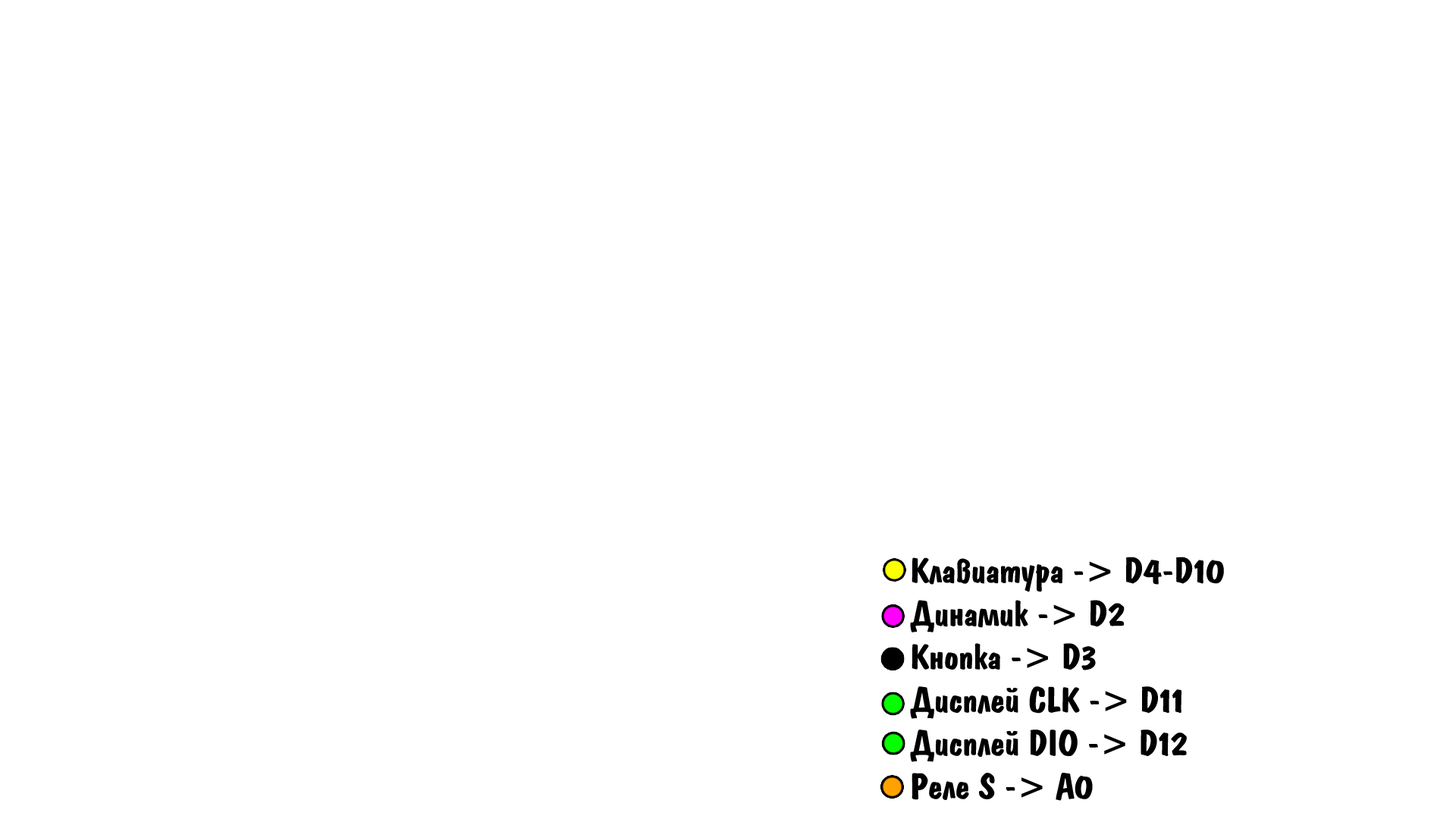
<style>
.page{position:relative;width:1456px;height:819px;background:#ffffff}
.page>*{position:absolute;margin:0}
.t1{font:36px "DomkratBold";letter-spacing:0.01em;color:#000000}
</style>
<div class="page">
<p class="t1" style="left:910px;top:557px;width:314px;height:244px">Клавиатура -&gt; D4-D10<br>Динамик -&gt; D2<br>Кнопка -&gt; D3<br>Дисплей CLK -&gt; D11<br>Дисплей DIO -&gt; D12<br>Реле S -&gt; A0</p>
</div>
